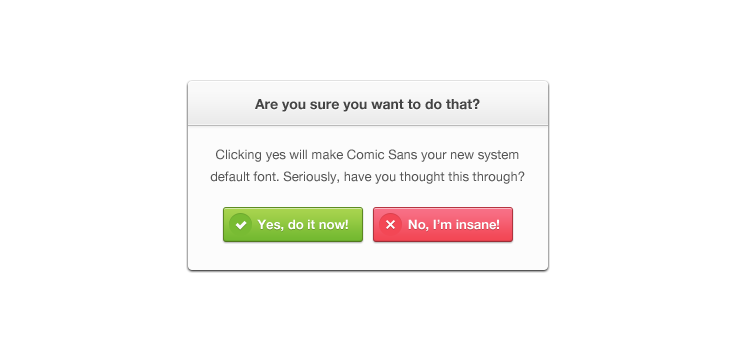
<style>
.page{position:relative;width:735px;height:350px;background:#ffffff}
.page>*{position:absolute;margin:0}
.t1{font:14px "HelveticaNeue-Bold";color:#444444}
.t2{font:13px/22px "HelveticaNeue";color:#555555}
.t3{font:13px "HelveticaNeue-Bold";color:#ffffff}
.t4{font:13px "HelveticaNeue-Bold";color:#fefefe}
</style>
<div class="page">
<p class="t1" style="left:255px;top:98px;width:225px;height:14px">Are you sure you want to do that?</p>
<p class="t2" style="left:210px;top:149px;width:315px;height:35px;text-align:center">Clicking yes will make Comic Sans your new system default font. Seriously, have you thought this through?</p>
<p class="t3" style="left:257px;top:219px;width:91px;height:13px">Yes, do it now!</p>
<p class="t4" style="left:408px;top:219px;width:91px;height:13px">No, I’m insane!</p>
</div>
